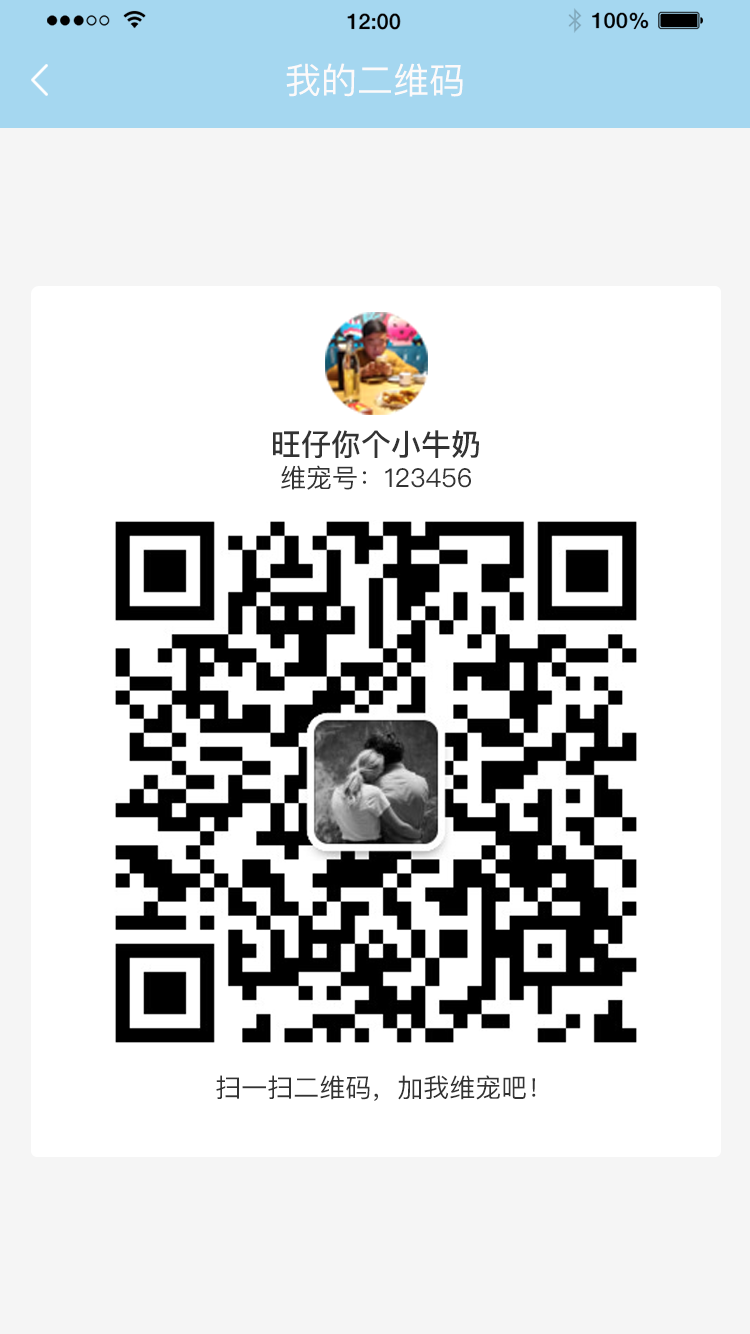
<style>
.page{position:relative;width:750px;height:1334px;background:#ffffff}
.page>*{position:absolute;margin:0}
.t1{font:36px "PingFangSC-Regular";color:#fdfafa}
.t2{font:30px "PingFangSC-Medium";color:#333333}
.t3{font:26px "PingFangSC-Regular";color:#333333}
</style>
<div class="page">
<p class="t1" style="left:286px;top:63px;width:177px;height:34px">我的二维码</p>
<p class="t2" style="left:273px;top:430px;width:206px;height:28px">旺仔你个小牛奶</p>
<p class="t3" style="left:281px;top:465px;width:190px;height:25px">维宠号：123456</p>
<p class="t3" style="left:216px;top:1075px;width:320px;height:26px">扫一扫二维码，加我维宠吧！</p>
</div>
